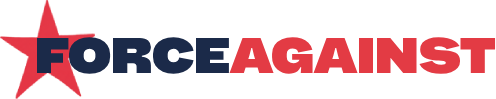
<style>
.page{position:relative;width:496px;height:99px;background:#ffffff}
.page>*{position:absolute;margin:0}
.t1{font:50px "BBHSansHegarty-Regular";color:#e33b44}
.t2{font:50px "BBHSansHegarty-Regular";color:#1b2a49}
</style>
<div class="page">
<p class="t1" style="left:37px;top:37px;width:459px;height:37px"><span class="t2">FORCE</span>AGAINST</p>
</div>
